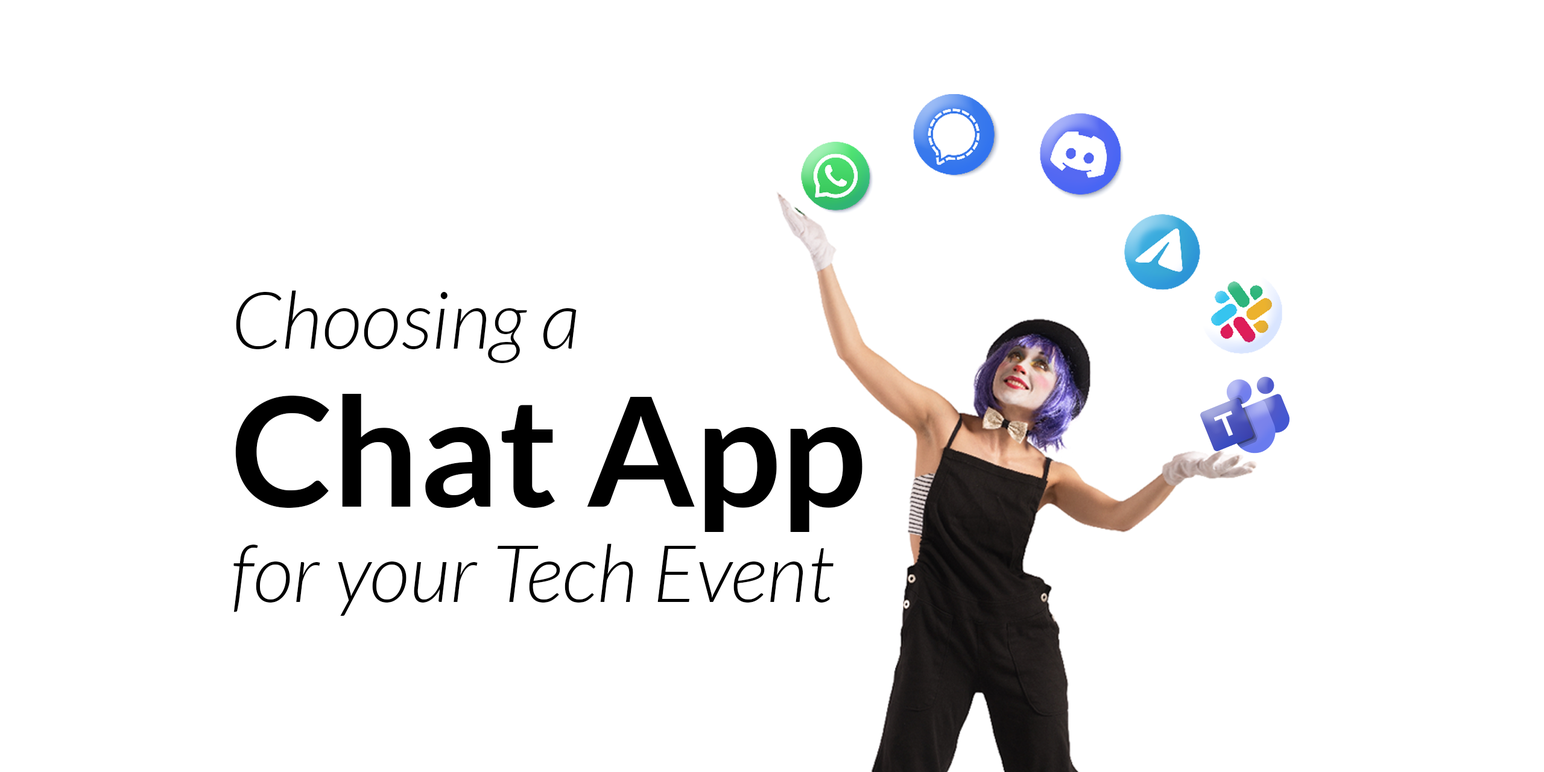
<style>
.page{position:relative;width:1544px;height:772px;background:#ffffff}
.page>*{position:absolute;margin:0}
.t1{font:79.6px "Lato-LightItalic";color:#000000}
.t2{font:152px/158px "Lato-Bold";color:#000000}
</style>
<div class="page">
<p class="t1" style="left:233px;top:290px;width:630px;height:326px">Choosing a<br><span class="t2">Chat App<br></span>for your Tech Event</p>
</div>
